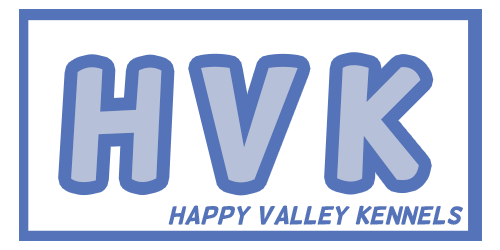
<style>
.page{position:relative;width:500px;height:250px;background:#ffffff}
.page>*{position:absolute;margin:0}
.t1{font:25px "Helsinki";color:#5573b8;font-style:italic}
</style>
<div class="page">
<p class="t1" style="left:168px;top:205px;width:295px;height:20px">happy valley kennels</p>
</div>
